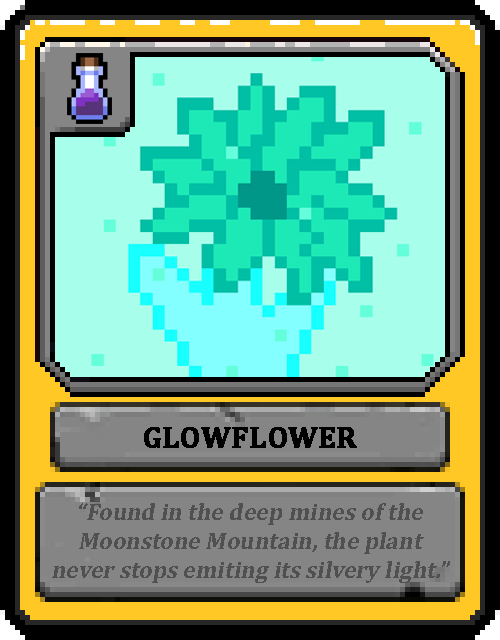
<style>
.page{position:relative;width:500px;height:640px}
.page>*{position:absolute;margin:0}
.t1{font:30px "Cambria-Bold";color:#000000;text-transform:uppercase;font-weight:bold}
.t2{font:24px "Cambria-Bold";color:#505050;font-style:italic}
</style>
<div class="page">
<p class="t1" style="left:144px;top:427px;width:213px;height:21px">Glowflower</p>
<p class="t2" style="left:52px;top:503px;width:398px;height:80px;text-align:center">“Found in the deep mines of the Moonstone Mountain, the plant never stops emiting its silvery light.”</p>
</div>
